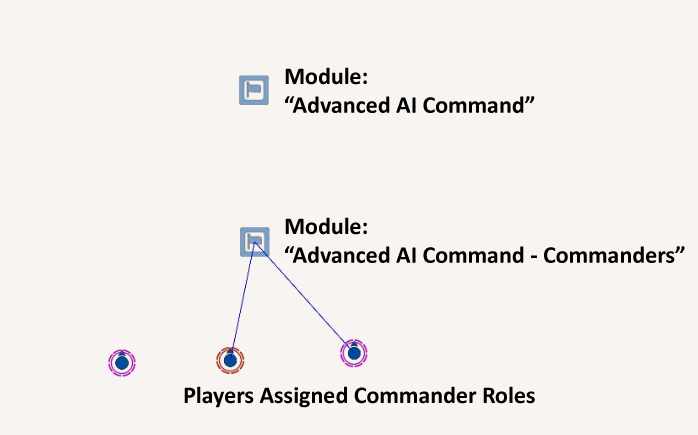
<style>
.page{position:relative;width:698px;height:435px;background:#f8f4f1}
.page>*{position:absolute;margin:0}
.t1{font:24px "Calibri-Bold";color:#000000}
</style>
<div class="page">
<p class="t1" style="left:285px;top:67px;width:250px;height:46px">Module:<br>“Advanced AI Command”</p>
<p class="t1" style="left:285px;top:217px;width:400px;height:46px">Module:<br>“Advanced AI Command - Commanders”</p>
<p class="t1" style="left:184px;top:386px;width:351px;height:22px">Players Assigned Commander Roles</p>
</div>
